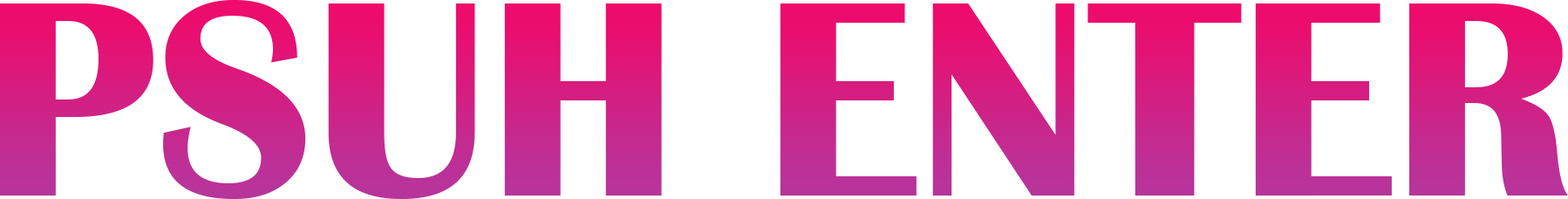
<style>
.page{position:relative;width:1568px;height:199px;background:#ffffff}
.page>*{position:absolute;margin:0}
.t1{font:288px "BritannicBold"}
</style>
<div class="page">
<p class="t1" style="left:0px;top:0px;width:1568px;height:199px">PSUH ENTER</p>
</div>
